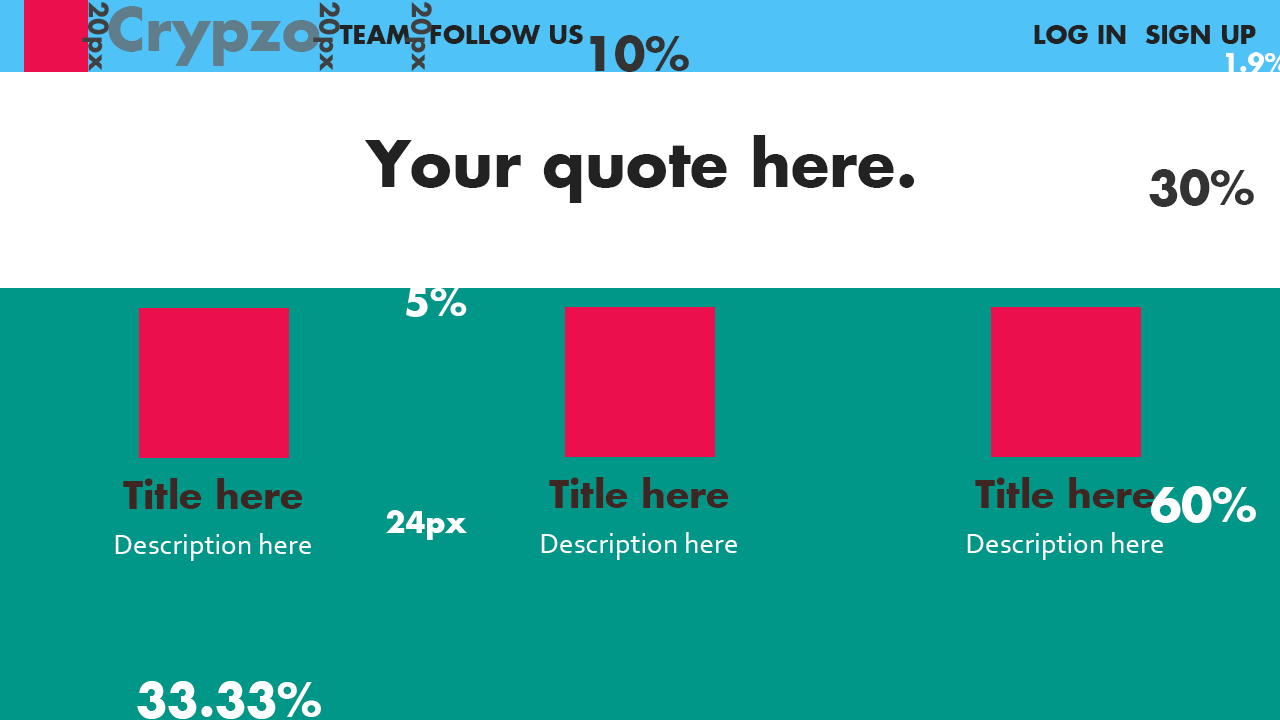
<style>
.page{position:relative;width:1280px;height:720px;background:#009688}
.page>*{position:absolute;margin:0}
.t1{font:25.4px "FuturaKoyu";color:#404040}
.t2{font:58.3px "FuturaKoyu";color:#607d8b}
.t3{font:25px "FuturaKoyu";color:#222222}
.t4{font:25.4px "FuturaKoyu";color:#222222}
.t5{font:45.8px "FuturaKoyu";color:#333333}
.t6{font:62.5px "FuturaKoyu";color:#222222}
.t7{font:37.5px "FuturaKoyu";color:#ffffff}
.t8{font:37.7px "FuturaKoyu";color:#3e2723}
.t9{font:45.8px "FuturaKoyu";color:#ffffff}
.t10{font:29.2px "FuturaKoyu";color:#ffffff}
.t11{font:29.2px "Corbel";color:#ffffff}
</style>
<div class="page">
<p class="t1" style="left:82px;top:2px;width:27px;height:70px;rotate:90deg">20px</p>
<p class="t2" style="left:108px;top:6px;width:212px;height:60px">Crypzo</p>
<p class="t1" style="left:313px;top:2px;width:27px;height:70px;rotate:90deg">20px</p>
<p class="t1" style="left:405px;top:2px;width:27px;height:70px;rotate:90deg">20px</p>
<p class="t3" style="left:339px;top:25px;width:72px;height:19px">TEAM</p>
<p class="t4" style="left:430px;top:25px;width:153px;height:19px">FOLLOW US</p>
<p class="t4" style="left:1034px;top:25px;width:92px;height:19px">LOG IN</p>
<p class="t4" style="left:1145px;top:25px;width:111px;height:19px">SIGN UP</p>
<p class="t5" style="left:590px;top:35px;width:99px;height:37px">10%</p>
<p class="t6" style="left:365px;top:135px;width:549px;height:68px">Your quote here.</p>
<p class="t5" style="left:1149px;top:169px;width:105px;height:38px">30%</p>
<p class="t7" style="left:406px;top:288px;width:61px;height:29px">5%</p>
<p class="t8" style="left:123px;top:478px;width:180px;height:31px">Title here</p>
<p class="t8" style="left:549px;top:477px;width:180px;height:31px">Title here</p>
<p class="t8" style="left:975px;top:477px;width:180px;height:31px">Title here</p>
<p class="t9" style="left:1151px;top:486px;width:105px;height:37px">60%</p>
<p class="t10" style="left:386px;top:510px;width:81px;height:30px">24px</p>
<p class="t11" style="left:115px;top:533px;width:196px;height:28px">Description here</p>
<p class="t11" style="left:541px;top:532px;width:196px;height:28px">Description here</p>
<p class="t11" style="left:967px;top:532px;width:196px;height:28px">Description here</p>
<p class="t9" style="left:137px;top:681px;width:184px;height:38px">33.33%</p>
</div>
